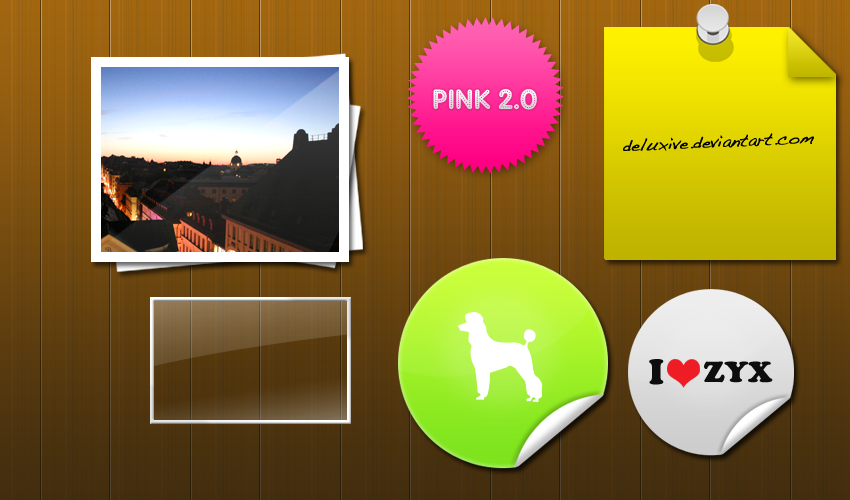
<style>
.page{position:relative;width:850px;height:500px}
.page>*{position:absolute;margin:0}
.t1{font:28px "AdamGorry-Lights";letter-spacing:-0.01em;color:#eaeaea}
.t2{font:17px "Handwriting-Dakota";letter-spacing:-0.01em;color:#000000;font-weight:bold}
</style>
<div class="page">
<p class="t1" style="left:433px;top:89px;width:104px;height:21px">PINK 2.0</p>
<p class="t2" style="left:623px;top:133px;width:191px;height:18px;rotate:-3deg">deluxive.deviantart.com</p>
</div>
